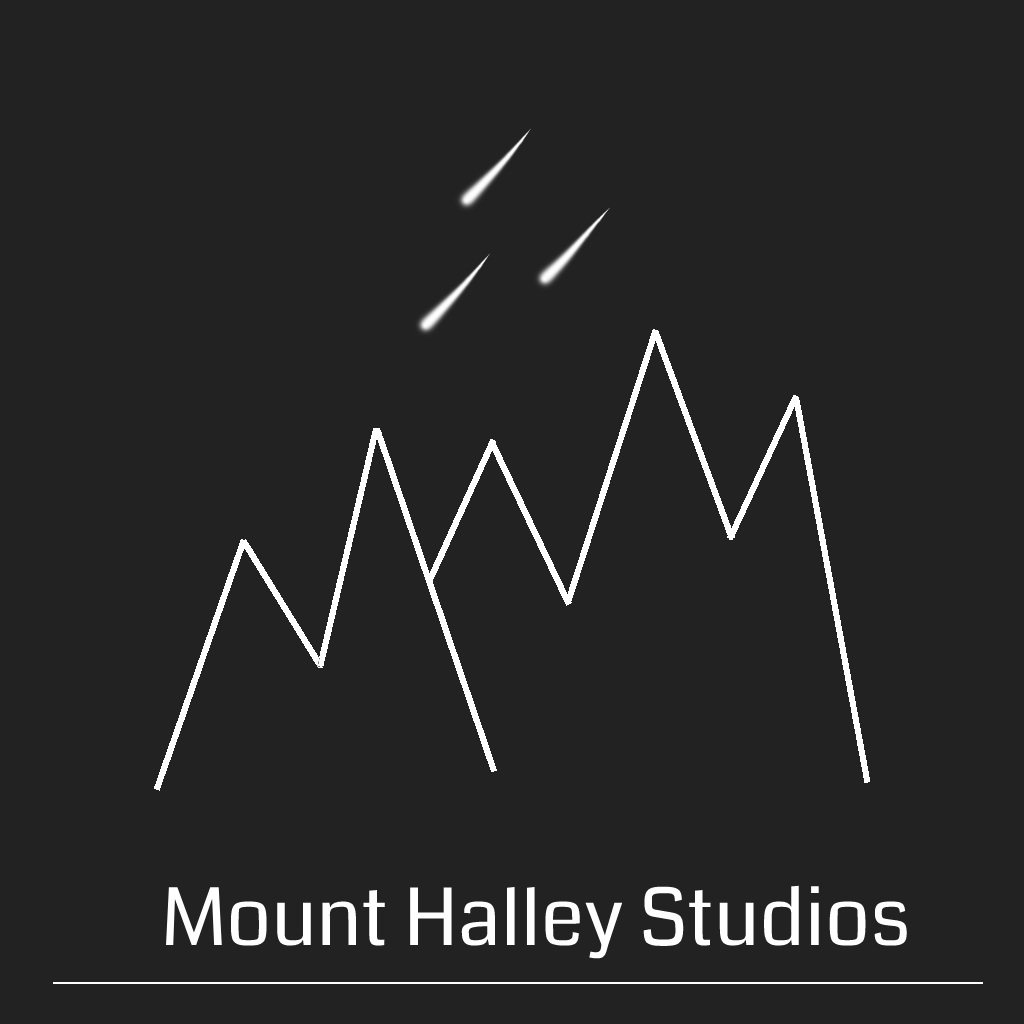
<style>
.page{position:relative;width:1024px;height:1024px;background:#222222}
.page>*{position:absolute;margin:0}
.t1{font:79px "Coda-Regular";color:#ffffff}
</style>
<div class="page">
<p class="t1" style="left:166px;top:885px;width:741px;height:74px">Mount Halley Studios</p>
</div>
